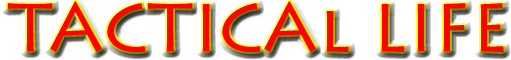
<style>
.page{position:relative;width:511px;height:60px;background:#ffffff}
.page>*{position:absolute;margin:0}
.t1{font:68px "LithosPro-Regular";color:#fe0101}
</style>
<div class="page">
<p class="t1" style="left:7px;top:1px;width:497px;height:51px">TACTICAl LIFE</p>
</div>
